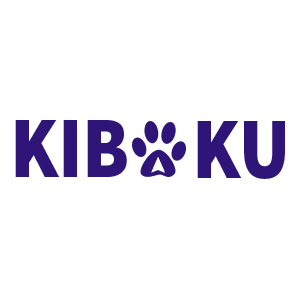
<style>
.page{position:relative;width:300px;height:300px;background:#ffffff}
.page>*{position:absolute;margin:0}
.t1{font:86.8px "SourceSansPro-Black";color:#301579;scale:0.88 1}
</style>
<div class="page">
<p class="t1" style="left:15px;top:120px;width:112px;height:57px">KIB</p>
<p class="t1" style="left:197px;top:121px;width:88px;height:58px">KU</p>
</div>
